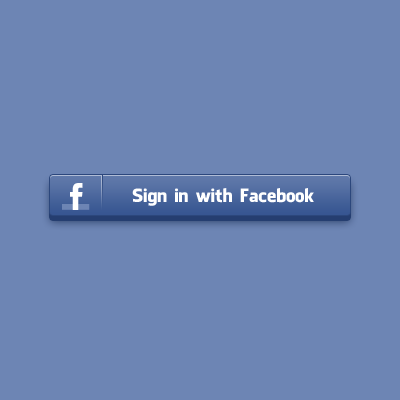
<style>
.page{position:relative;width:400px;height:400px;background:#6d85b4}
.page>*{position:absolute;margin:0}
.t1{font:18px "FacebookLetterFaces";color:#ffffff}
</style>
<div class="page">
<p class="t1" style="left:132px;top:188px;width:182px;height:18px">Sign in with Facebook</p>
</div>
